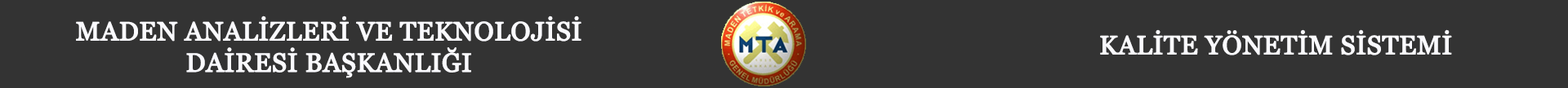
<style>
.page{position:relative;width:1568px;height:88px;background:#333333}
.page>*{position:absolute;margin:0}
.t1{font:26.1px "Georgia";color:#fafafe;font-weight:bold}
</style>
<div class="page">
<p class="t1" style="left:76px;top:16px;width:505px;height:62px;text-align:center">MADEN ANALİZLERİ VE TEKNOLOJİSİ<br>DAİRESİ BAŞKANLIĞI</p>
<p class="t1" style="left:1100px;top:29px;width:352px;height:27px">KALİTE YÖNETİM SİSTEMİ</p>
</div>
